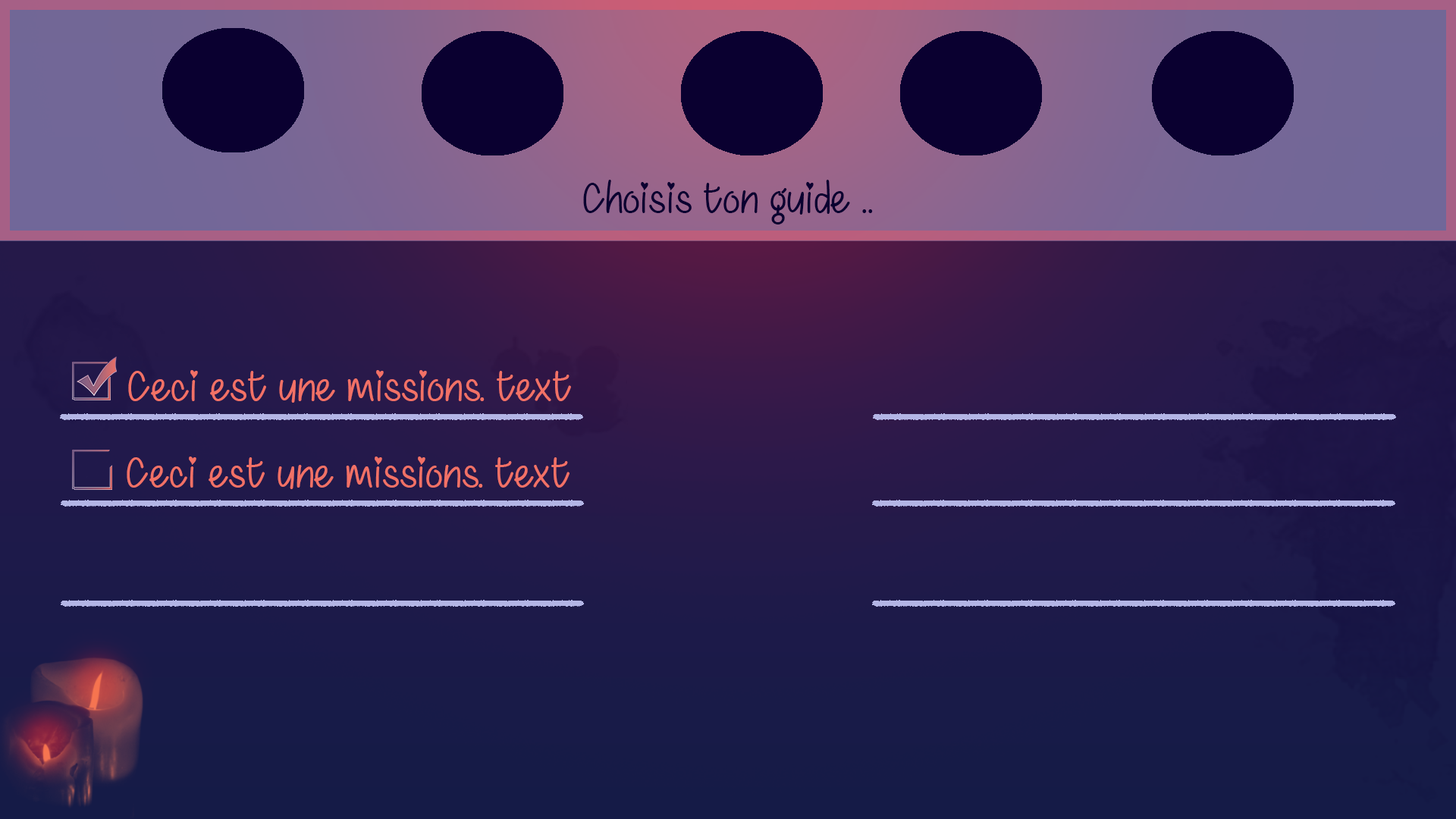
<style>
.page{position:relative;width:1456px;height:819px}
.page>*{position:absolute;margin:0}
.t1{font:44.2px "ChasingHearts-Regular";color:#0a0030}
.t2{font:44.2px "ChasingHearts-Regular";color:#f27166}
</style>
<div class="page">
<p class="t1" style="left:583px;top:180px;width:290px;height:44px">Choisis ton guide ..</p>
<p class="t2" style="left:128px;top:370px;width:443px;height:33px">Ceci est une missions. text</p>
<p class="t2" style="left:127px;top:457px;width:443px;height:32px">Ceci est une missions. text</p>
</div>
